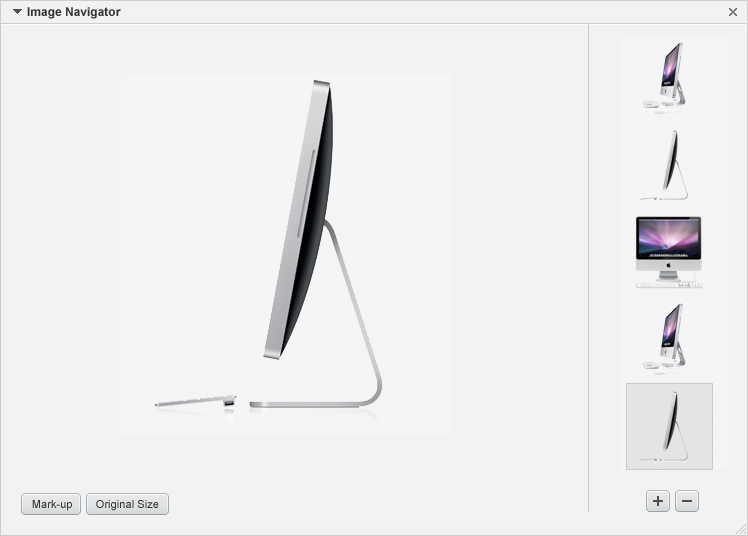
<style>
.page{position:relative;width:748px;height:536px;background:#f2f2f2}
.page>*{position:absolute;margin:0}
.t1{font:12px "Arial-BoldMT";color:#333333}
.t2{font:11px "ArialMT";letter-spacing:0.005em;color:#333333}
</style>
<div class="page">
<p class="t1" style="left:27px;top:7px;width:94px;height:12px">Image Navigator</p>
<p class="t2" style="left:32px;top:500px;width:40px;height:11px">Mark-up</p>
<p class="t2" style="left:96px;top:500px;width:63px;height:11px">Original Size</p>
</div>
